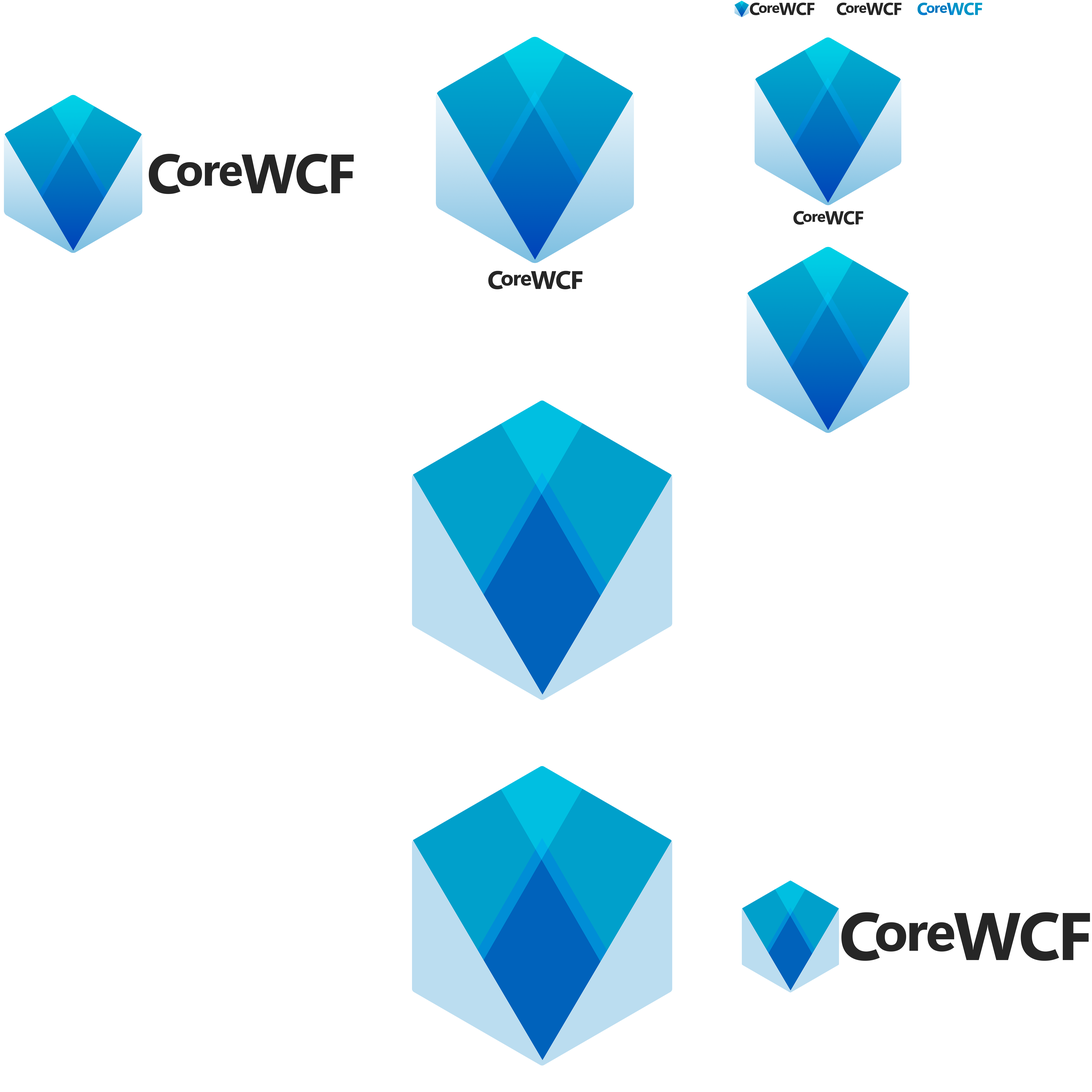
<style>
.page{position:relative;width:1092px;height:1092px;background:#ffffff}
.page>*{position:absolute;margin:0}
.t1{font:14.4px "SegoeUIVariable-BoldText";letter-spacing:-0.04em;color:#262626}
.t2{font:17.4px "SegoeUIVariable-BoldText";letter-spacing:-0.1em;color:#262626}
.t3{font:17.4px "SegoeUIVariable-BoldText";letter-spacing:-0.04em;color:#262626}
.t4{font:14.4px "SegoeUIVariable-BoldText";letter-spacing:-0.04em;color:#0091c7}
.t5{font:17.4px "SegoeUIVariable-BoldText";letter-spacing:-0.1em;color:#0091c7}
.t6{font:17.4px "SegoeUIVariable-BoldText";letter-spacing:-0.04em;color:#0091c7}
.t7{font:45.8px "SegoeUIVariable-BoldText";letter-spacing:-0.04em;color:#262626}
.t8{font:55.3px "SegoeUIVariable-BoldText";letter-spacing:-0.1em;color:#262626}
.t9{font:55.3px "SegoeUIVariable-BoldText";letter-spacing:-0.04em;color:#262626}
.t10{font:21px "SegoeUIVariable-BoldText";letter-spacing:-0.04em;color:#262626}
.t11{font:25.4px "SegoeUIVariable-BoldText";letter-spacing:-0.1em;color:#262626}
.t12{font:25.4px "SegoeUIVariable-BoldText";letter-spacing:-0.04em;color:#262626}
.t13{font:55.5px "SegoeUIVariable-BoldText";letter-spacing:-0.04em;color:#262626}
.t14{font:67.1px "SegoeUIVariable-BoldText";letter-spacing:-0.1em;color:#262626}
.t15{font:67.1px "SegoeUIVariable-BoldText";letter-spacing:-0.04em;color:#262626}
</style>
<div class="page">
<p class="t1" style="left:750px;top:3px;width:65px;height:12px"><span class="t2">C</span>ore<span class="t3">WCF</span></p>
<p class="t1" style="left:837px;top:3px;width:65px;height:12px"><span class="t2">C</span>ore<span class="t3">WCF</span></p>
<p class="t4" style="left:917px;top:3px;width:65px;height:12px"><span class="t5">C</span>ore<span class="t6">WCF</span></p>
<p class="t7" style="left:149px;top:154px;width:205px;height:40px"><span class="t8">C</span>ore<span class="t9">WCF</span></p>
<p class="t10" style="left:488px;top:271px;width:95px;height:18px"><span class="t11">C</span>ore<span class="t12">WCF</span></p>
<p class="t13" style="left:841px;top:912px;width:249px;height:49px"><span class="t14">C</span>ore<span class="t15">WCF</span></p>
</div>
